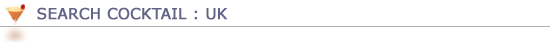
<style>
.page{position:relative;width:550px;height:42px;background:#ffffff}
.page>*{position:absolute;margin:0}
.t1{font:15px "Verdana";color:#636388;font-weight:bold}
</style>
<div class="page">
<p class="t1" style="left:37px;top:7px;width:191px;height:13px">SEARCH COCKTAIL : UK</p>
</div>
